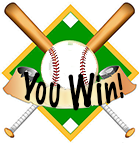
<style>
.page{position:relative;width:139px;height:143px;background:#ffffff}
.page>*{position:absolute;margin:0}
.t1{font:29.2px "MarkerFelt-Thin";color:#000000}
</style>
<div class="page">
<p class="t1" style="left:23px;top:71px;width:101px;height:40px">You Win!</p>
</div>
